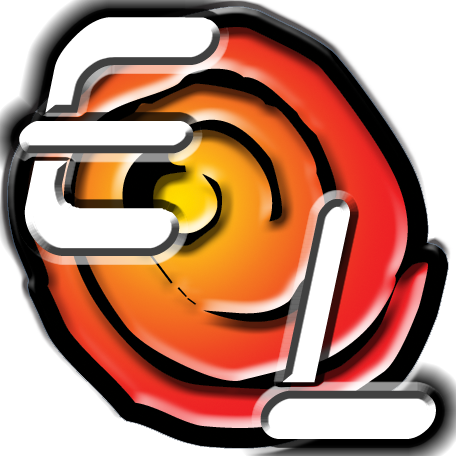
<style>
.page{position:relative;width:456px;height:456px;background:#ffffff}
.page>*{position:absolute;margin:0}
.t1{font:320px "Bulgari";color:#ffffff}
</style>
<div class="page">
<p class="t1" style="left:19px;top:17px;width:201px;height:239px">E</p>
<p class="t1" style="left:260px;top:199px;width:176px;height:240px">L</p>
</div>
